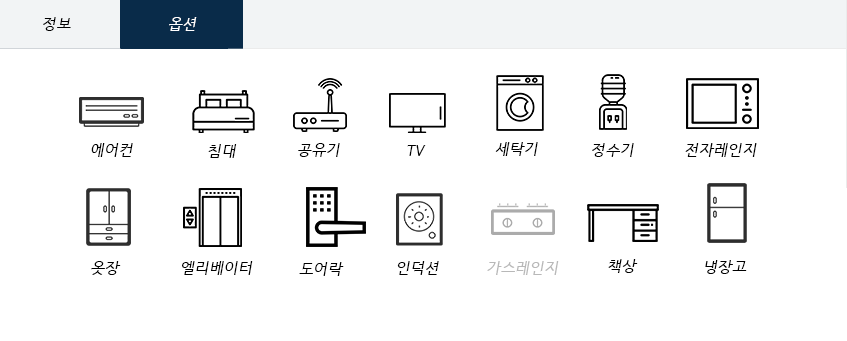
<style>
.page{position:relative;width:847px;height:341px;background:#ffffff}
.page>*{position:absolute;margin:0}
.t1{font:15px "HCRDotum";color:#000000;font-style:italic}
.t2{font:15px "HCRDotum";color:#ffffff;font-style:italic}
.t3{font:15px "HCRDotum";color:#b8b8b8;font-style:italic}
</style>
<div class="page">
<p class="t1" style="left:43px;top:17px;width:28px;height:14px">정보</p>
<p class="t2" style="left:169px;top:17px;width:28px;height:14px">옵션</p>
<p class="t1" style="left:91px;top:143px;width:42px;height:14px">에어컨</p>
<p class="t1" style="left:208px;top:144px;width:29px;height:14px">침대</p>
<p class="t1" style="left:298px;top:143px;width:42px;height:14px">공유기</p>
<p class="t1" style="left:407px;top:145px;width:19px;height:11px">TV</p>
<p class="t1" style="left:495px;top:142px;width:43px;height:14px">세탁기</p>
<p class="t1" style="left:592px;top:143px;width:42px;height:14px">정수기</p>
<p class="t1" style="left:685px;top:143px;width:72px;height:14px">전자레인지</p>
<p class="t1" style="left:91px;top:261px;width:30px;height:14px">옷장</p>
<p class="t1" style="left:182px;top:261px;width:71px;height:14px">엘리베이터</p>
<p class="t1" style="left:299px;top:262px;width:45px;height:14px">도어락</p>
<p class="t1" style="left:397px;top:261px;width:42px;height:14px">인덕션</p>
<p class="t3" style="left:487px;top:261px;width:72px;height:14px">가스레인지</p>
<p class="t1" style="left:608px;top:259px;width:30px;height:14px">책상</p>
<p class="t1" style="left:705px;top:260px;width:42px;height:14px">냉장고</p>
</div>
